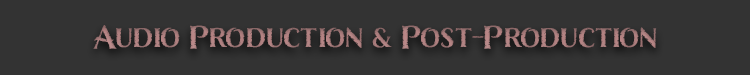
<style>
.page{position:relative;width:750px;height:75px;background:#333333}
.page>*{position:absolute;margin:0}
.t1{font:30px "Nelson-Bold";color:#ad7e7e}
</style>
<div class="page">
<p class="t1" style="left:93px;top:25px;width:564px;height:24px">Audio Production &amp; Post-Production</p>
</div>
